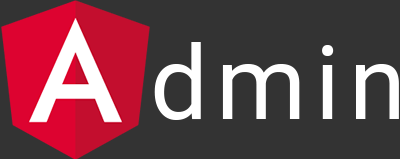
<style>
.page{position:relative;width:400px;height:159px;background:#333333}
.page>*{position:absolute;margin:0}
.t1{font:103.4px "Roboto-Regular";letter-spacing:0.08em;color:#ffffff}
</style>
<div class="page">
<p class="t1" style="left:154px;top:42px;width:245px;height:78px">dmin</p>
</div>
